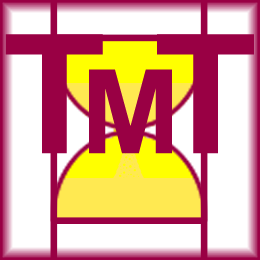
<style>
.page{position:relative;width:260px;height:260px;background:#ffffff}
.page>*{position:absolute;margin:0}
.t1{font:165.9px "ArialNarrow-Bold";color:#990044;scale:1.25 1}
.t2{font:116.6px "ArialNarrow-Bold";color:#990044;scale:1.25 1}
</style>
<div class="page">
<p class="t1" style="left:5px;top:34px;width:249px;height:120px">T T</p>
<p class="t2" style="left:89px;top:69px;width:83px;height:85px">M</p>
</div>
